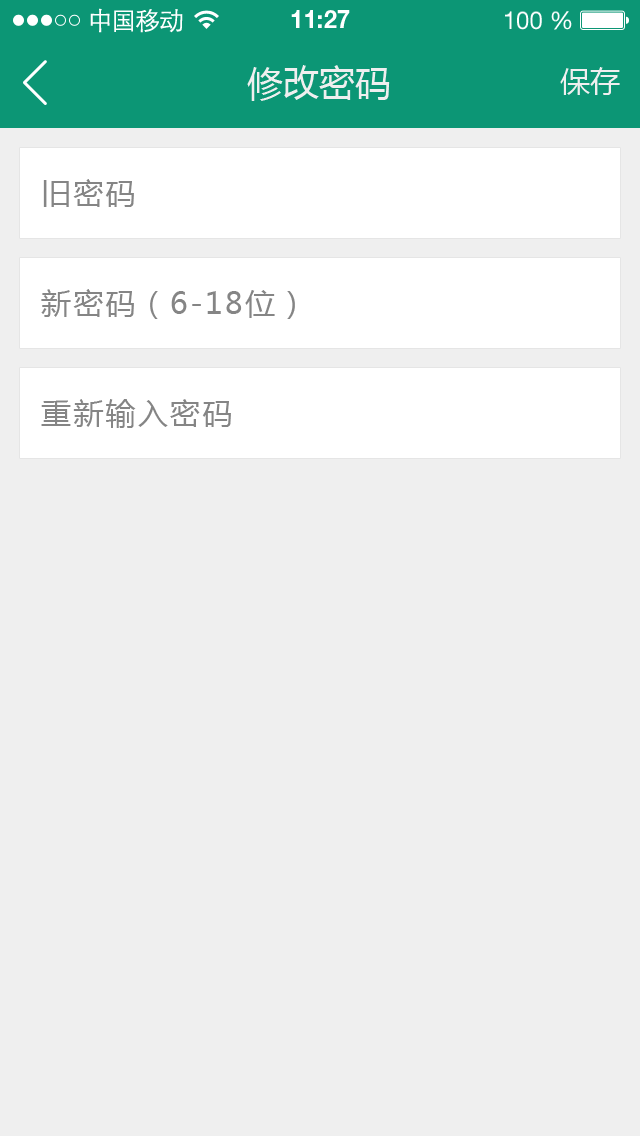
<style>
.page{position:relative;width:640px;height:1136px;background:#efefef}
.page>*{position:absolute;margin:0}
.t1{font:25px "STXihei";letter-spacing:-0.045em;color:#fefefe}
.t2{font:24.6px "HelveticaNeueLTPro-Bd";color:#ffffff}
.t3{font:24.6px "HelveticaNeueLTStd-Roman";color:#ffffff}
.t4{font:36px "MicrosoftYaHei";color:#efefef}
.t5{font:30px "MicrosoftYaHei";color:#efefef}
.t6{font:30px "MicrosoftYaHei";letter-spacing:0.075em;color:#858585}
</style>
<div class="page">
<p class="t1" style="left:90px;top:8px;width:93px;height:25px">中国移动</p>
<p class="t2" style="left:291px;top:10px;width:59px;height:18px">11:27</p>
<p class="t3" style="left:505px;top:11px;width:67px;height:19px">100 %</p>
<p class="t4" style="left:247px;top:65px;width:143px;height:36px">修改密码</p>
<p class="t5" style="left:560px;top:67px;width:60px;height:28px">保存</p>
<p class="t6" style="left:43px;top:179px;width:91px;height:28px">旧密码</p>
<p class="t6" style="left:41px;top:289px;width:254px;height:30px">新密码（6-18位）</p>
<p class="t6" style="left:41px;top:399px;width:190px;height:29px">重新输入密码</p>
</div>
